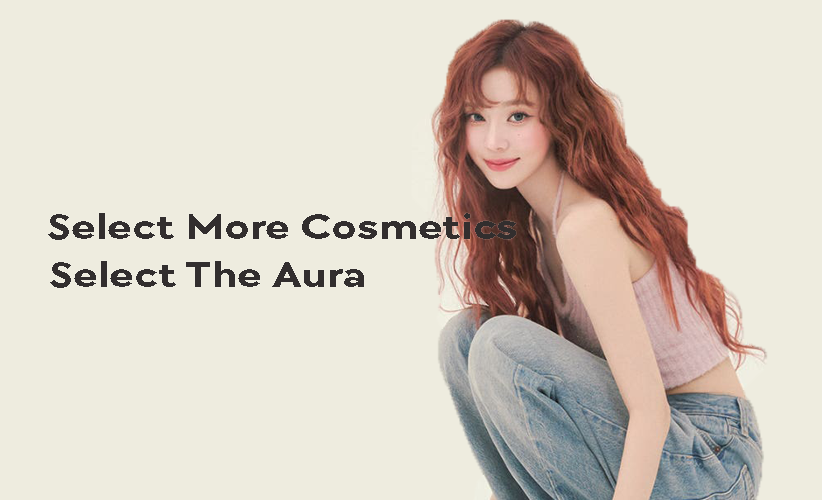
<style>
.page{position:relative;width:822px;height:500px;background:#eeecdf}
.page>*{position:absolute;margin:0}
.t1{font:37px "TTChocolates-Bold";color:#322e2e;scale:1.26 1}
</style>
<div class="page">
<p class="t1" style="left:48px;top:213px;width:468px;height:27px">Select More Cosmetics</p>
<p class="t1" style="left:50px;top:261px;width:314px;height:27px">Select The Aura</p>
</div>
